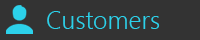
<style>
.page{position:relative;width:200px;height:40px;background:#333333}
.page>*{position:absolute;margin:0}
.t1{font:25px "SegoeUI-Semilight";color:#2cd1ea}
</style>
<div class="page">
<p class="t1" style="left:47px;top:11px;width:113px;height:18px">Customers</p>
</div>
